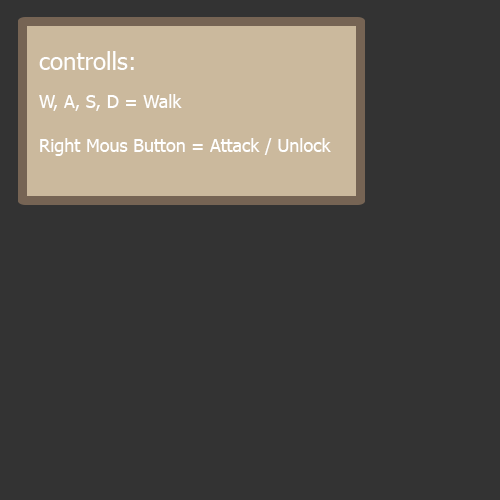
<style>
.page{position:relative;width:500px;height:500px;background:#333333}
.page>*{position:absolute;margin:0}
.t1{font:18px "Tahoma";color:#ffffff}
.t2{font:24px "Tahoma";color:#ffffff}
</style>
<div class="page">
<p class="t1" style="left:39px;top:51px;width:292px;height:105px"><span class="t2">controlls: <br><br></span>W, A, S, D = Walk<br><br>Right Mous Button = Attack / Unlock</p>
</div>
